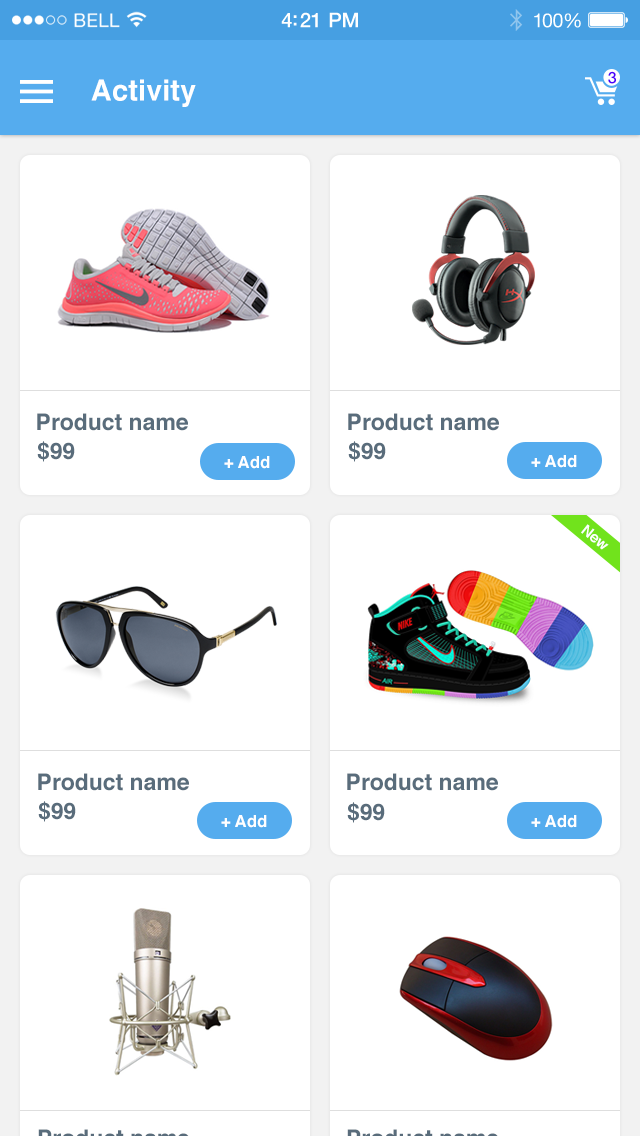
<style>
.page{position:relative;width:640px;height:1136px;background:#ffffff}
.page>*{position:absolute;margin:0}
.t1{font:20.4px "HelveticaNeue-Medium";letter-spacing:-0.02em;color:#ffffff}
.t2{font:19.6px "HelveticaNeue";letter-spacing:-0.02em;color:#ffffff}
.t3{font:16px "HelveticaNeue-Medium";color:#4c00fa}
.t4{font:29.2px "Helvetica-Bold";color:#ffffff}
.t5{font:22.9px "Helvetica-Bold";color:#596c7b}
.t6{font:16.7px "Helvetica-Bold";color:#ffffff}
.t7{font:14.9px "Helvetica-Bold";color:#ffffff}
</style>
<div class="page">
<p class="t1" style="left:281px;top:12px;width:77px;height:16px">4:21 PM</p>
<p class="t2" style="left:534px;top:13px;width:47px;height:15px">100%</p>
<p class="t3" style="left:608px;top:71px;width:9px;height:13px">3</p>
<p class="t4" style="left:91px;top:79px;width:105px;height:28px">Activity</p>
<p class="t5" style="left:37px;top:413px;width:151px;height:18px">Product name</p>
<p class="t5" style="left:348px;top:413px;width:151px;height:18px">Product name</p>
<p class="t5" style="left:37px;top:441px;width:38px;height:21px">$99</p>
<p class="t5" style="left:348px;top:441px;width:38px;height:21px">$99</p>
<p class="t6" style="left:224px;top:456px;width:46px;height:13px">+ Add</p>
<p class="t6" style="left:531px;top:455px;width:46px;height:13px">+ Add</p>
<p class="t7" style="left:581px;top:524px;width:28px;height:26px;rotate:39deg">New</p>
<p class="t5" style="left:38px;top:773px;width:151px;height:18px">Product name</p>
<p class="t5" style="left:347px;top:773px;width:151px;height:18px">Product name</p>
<p class="t5" style="left:38px;top:801px;width:38px;height:21px">$99</p>
<p class="t5" style="left:347px;top:802px;width:38px;height:21px">$99</p>
<p class="t6" style="left:221px;top:815px;width:46px;height:13px">+ Add</p>
<p class="t6" style="left:531px;top:815px;width:46px;height:13px">+ Add</p>
</div>
